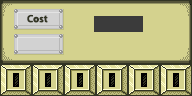
<style>
.page{position:relative;width:192px;height:96px;background:#d4d28e}
.page>*{position:absolute;margin:0}
.t1{font:10.7px "MyriadHebrew-Bold";color:#323423}
</style>
<div class="page">
<p class="t1" style="left:27px;top:14px;width:21px;height:9px">Cost</p>
</div>
